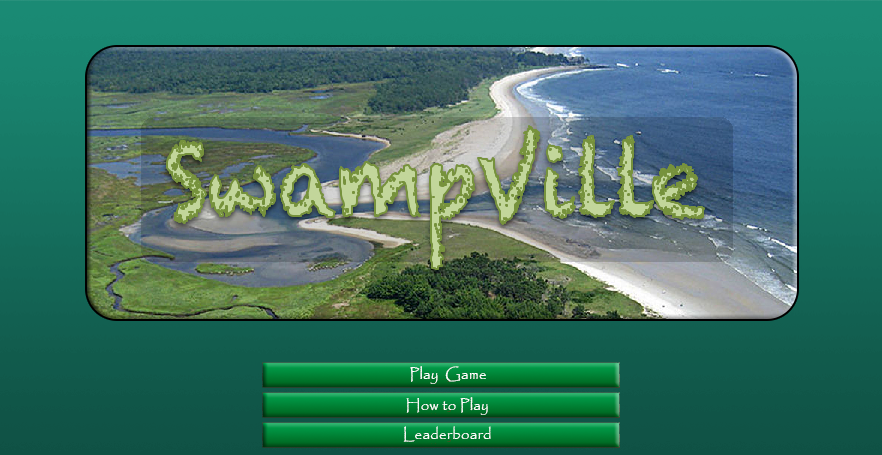
<style>
.page{position:relative;width:882px;height:455px}
.page>*{position:absolute;margin:0}
.t1{font:15.5px "Papyrus-Regular";color:#ffffff}
</style>
<div class="page">
<p class="t1" style="left:410px;top:366px;width:76px;height:18px">Play  Game</p>
<p class="t1" style="left:406px;top:397px;width:82px;height:18px">How to Play</p>
<p class="t1" style="left:403px;top:426px;width:88px;height:16px">Leaderboard</p>
</div>
